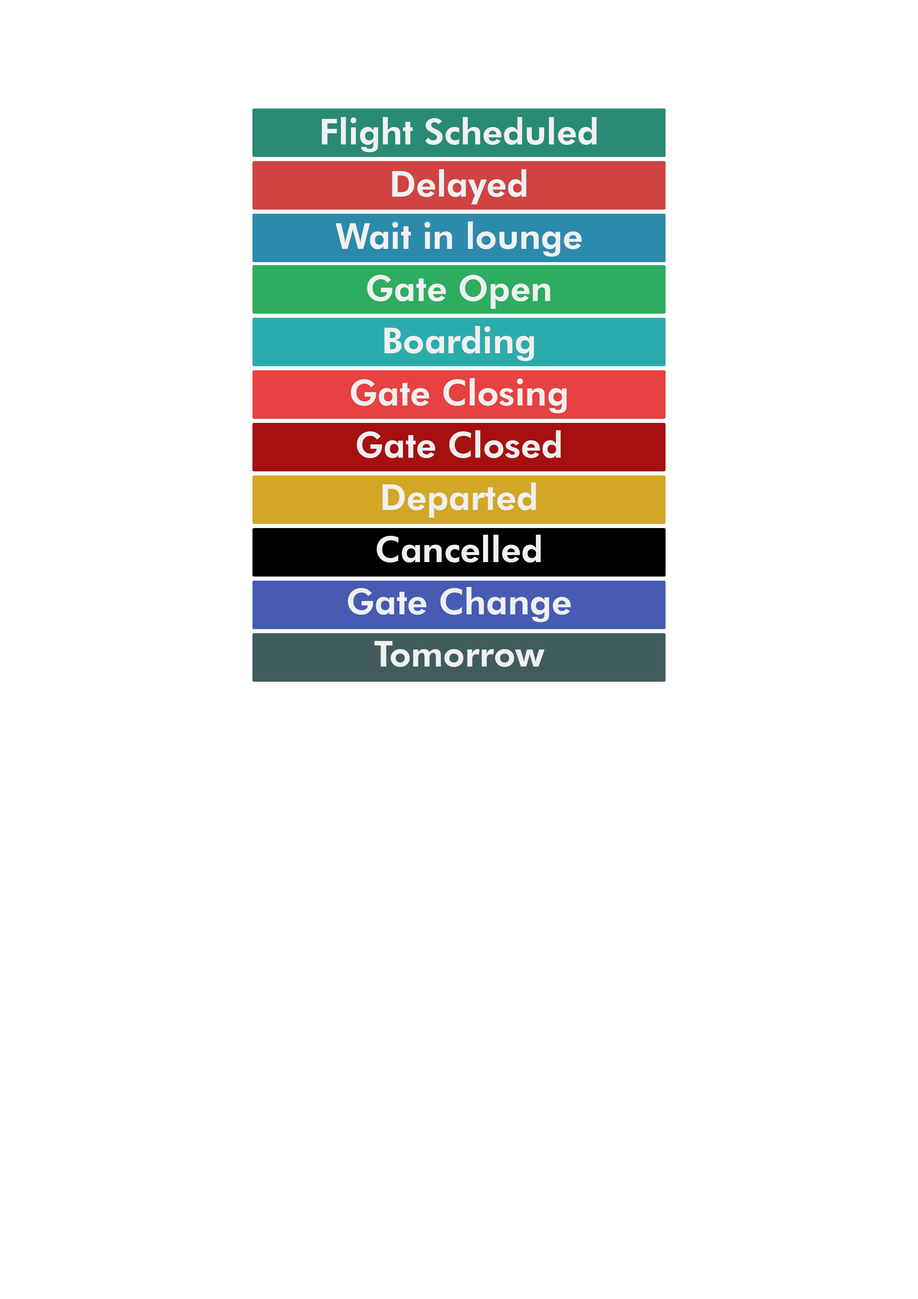
<style>
.page{position:relative;width:918px;height:1299px;background:#ffffff}
.page>*{position:absolute;margin:0}
.t1{font:35.5px/52.2px "FuturaBT-Heavy";color:#f0f0f0}
</style>
<div class="page">
<p class="t1" style="left:322px;top:117px;width:275px;height:550px;text-align:center">Flight Scheduled<br>Delayed<br>Wait in lounge<br>Gate Open<br>Boarding<br>Gate Closing<br>Gate Closed<br>Departed<br>Cancelled<br>Gate Change<br>Tomorrow</p>
</div>
